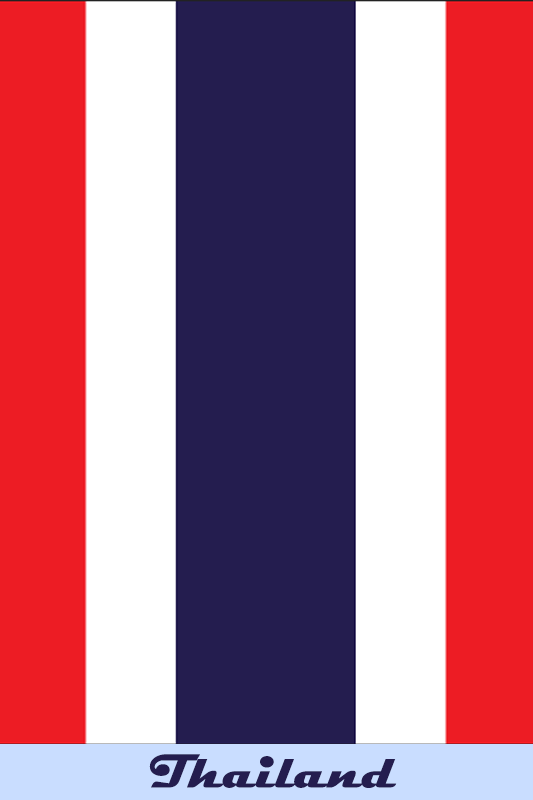
<style>
.page{position:relative;width:533px;height:800px;background:#241d4f}
.page>*{position:absolute;margin:0}
.t1{font:48px "Magneto-Bold";color:#241d4f;scale:1.08 1}
</style>
<div class="page">
<p class="t1" style="left:149px;top:754px;width:248px;height:34px">Thailand</p>
</div>
